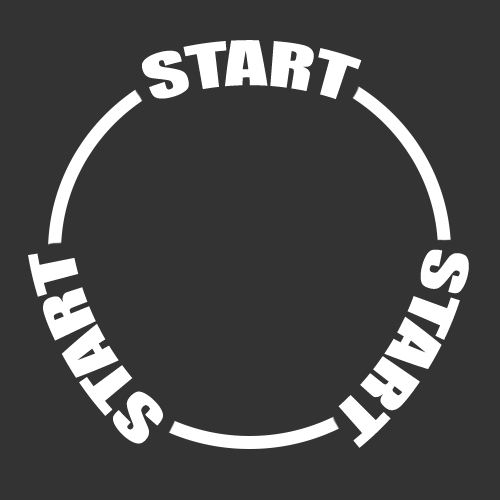
<style>
.page{position:relative;width:500px;height:500px;background:#333333}
.page>*{position:absolute;margin:0}
.t1{font:56.9px "Impact";color:#ffffff}
</style>
<div class="page">
<p class="t1" style="left:142px;top:40px;width:220px;height:59px">START</p>
<p class="t1" style="left:28px;top:253px;width:135px;height:191px;rotate:-120deg">START</p>
<p class="t1" style="left:338px;top:249px;width:131px;height:199px;rotate:120deg">START</p>
</div>
